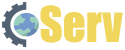
<style>
.page{position:relative;width:125px;height:50px;background:#ffffff}
.page>*{position:absolute;margin:0}
.t1{font:45px "Impact";color:#f1d65e}
</style>
<div class="page">
<p class="t1" style="left:40px;top:5px;width:83px;height:38px">Serv</p>
</div>
